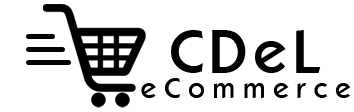
<style>
.page{position:relative;width:354px;height:112px;background:#ffffff}
.page>*{position:absolute;margin:0}
.t1{font:58.3px "Koblenz-Serial-Medium-Regular";letter-spacing:0.1em;color:#000000}
.t2{font:27.3px "Koblenz-Serial-Medium-Regular";letter-spacing:0.28em;color:#000000}
</style>
<div class="page">
<p class="t1" style="left:171px;top:30px;width:150px;height:43px">CDeL</p>
<p class="t2" style="left:141px;top:78px;width:210px;height:20px">eCommerce</p>
</div>
